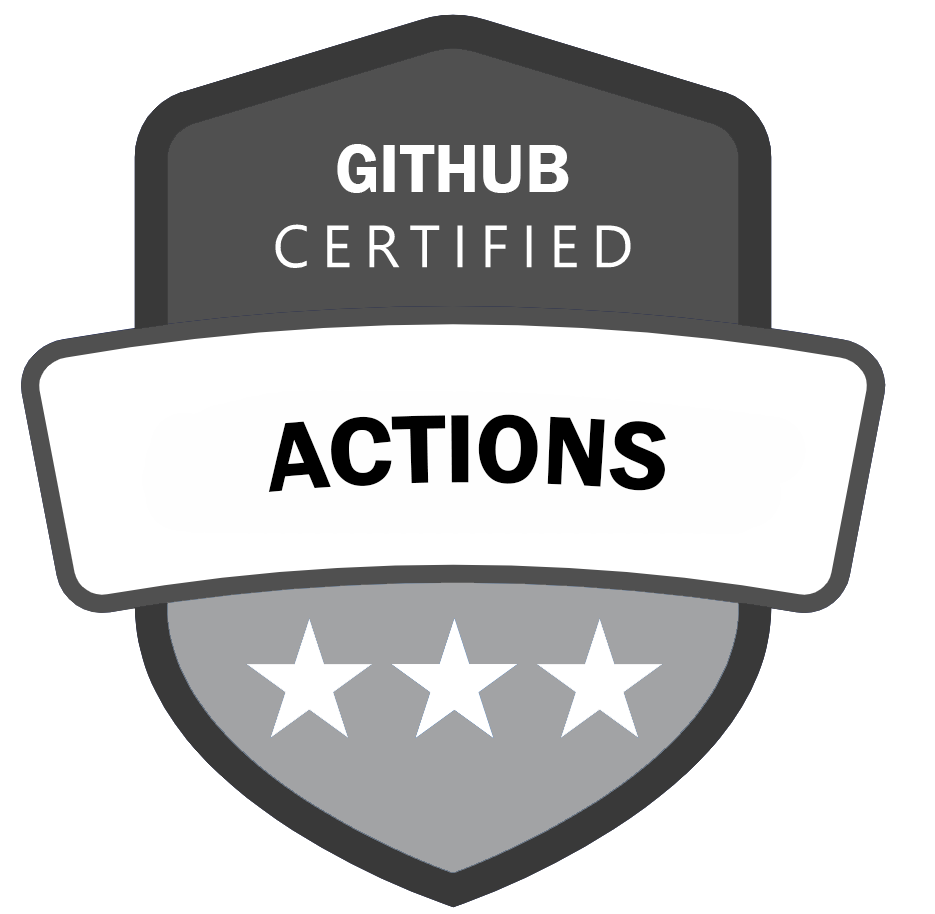
<style>
.page{position:relative;width:935px;height:914px;background:#ffffff}
.page>*{position:absolute;margin:0}
.t1{font:70px "FranklinGothic-Demi";color:#ffffff}
.t2{font:100px "FranklinGothic-Demi";color:#000000}
</style>
<div class="page">
<p class="t1" style="left:337px;top:144px;width:232px;height:49px">GITHUB</p>
<p class="t2" style="left:268px;top:414px;width:398px;height:78px">ACTIONS</p>
</div>
